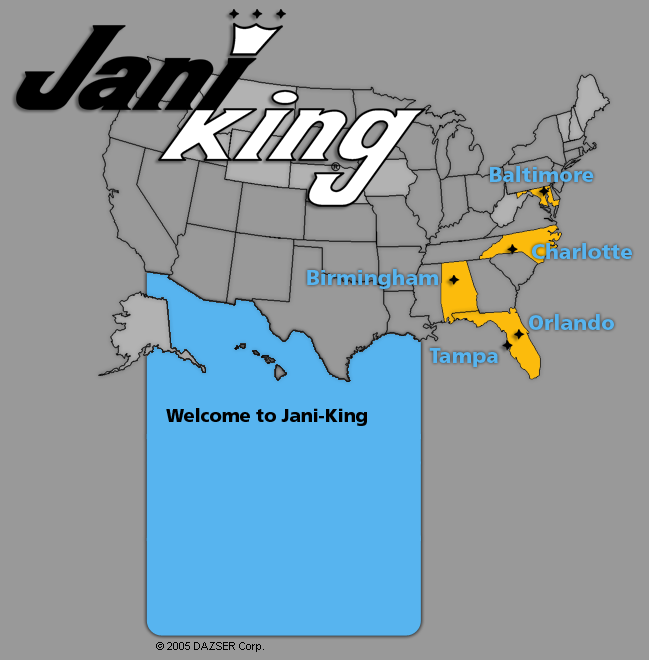
<style>
.page{position:relative;width:649px;height:660px;background:#999999}
.page>*{position:absolute;margin:0}
.t1{font:20.8px "FrutigerLTStd-Black";color:#57b4ef}
.t2{font:18px "FrutigerLTStd-Black";color:#000000}
.t3{font:11px "ArialMT";color:#010101}
</style>
<div class="page">
<p class="t1" style="left:490px;top:166px;width:104px;height:16px">Baltimore</p>
<p class="t1" style="left:532px;top:243px;width:100px;height:16px">Charlotte</p>
<p class="t1" style="left:307px;top:269px;width:131px;height:20px">Birmingham</p>
<p class="t1" style="left:529px;top:314px;width:85px;height:16px">Orlando</p>
<p class="t1" style="left:429px;top:348px;width:69px;height:19px">Tampa</p>
<p class="t2" style="left:166px;top:408px;width:201px;height:18px">Welcome to Jani-King</p>
<p class="t3" style="left:156px;top:642px;width:108px;height:10px">© 2005 DAZSER Corp.</p>
</div>
